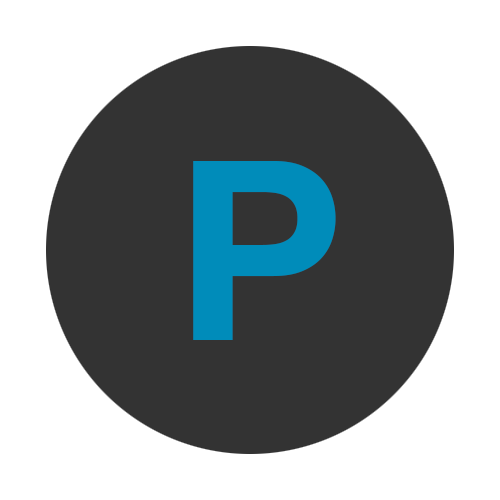
<style>
.page{position:relative;width:500px;height:500px;background:#ffffff}
.page>*{position:absolute;margin:0}
.t1{font:250px "HelveticaNeue-Bold";color:#008cba}
</style>
<div class="page">
<p class="t1" style="left:193px;top:161px;width:143px;height:179px">P</p>
</div>
